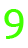
<style>
.page{position:relative;width:28px;height:48px;background:#ffffff}
.page>*{position:absolute;margin:0}
.t1{font:48px "UbuntuMono-Regular";color:#42ff00}
</style>
<div class="page">
<p class="t1" style="left:4px;top:9px;width:20px;height:30px">9</p>
</div>
